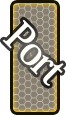
<style>
.page{position:relative;width:66px;height:115px;background:#ffffff}
.page>*{position:absolute;margin:0}
.t1{font:42px "HeiseiMinStd-W7";letter-spacing:-0.04em;color:#fffef9;scale:0.9 1}
</style>
<div class="page">
<p class="t1" style="left:2px;top:19px;width:62px;height:67px;rotate:45deg">Port</p>
</div>
